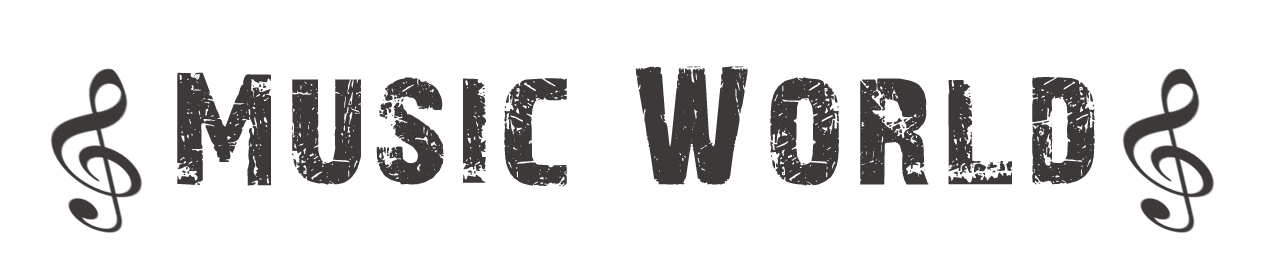
<style>
.page{position:relative;width:1263px;height:271px;background:#ffffff}
.page>*{position:absolute;margin:0}
.t1{font:158.8px "28DaysLater";letter-spacing:0.07em;color:#3d3939}
</style>
<div class="page">
<p class="t1" style="left:177px;top:66px;width:918px;height:121px">Music World</p>
</div>
